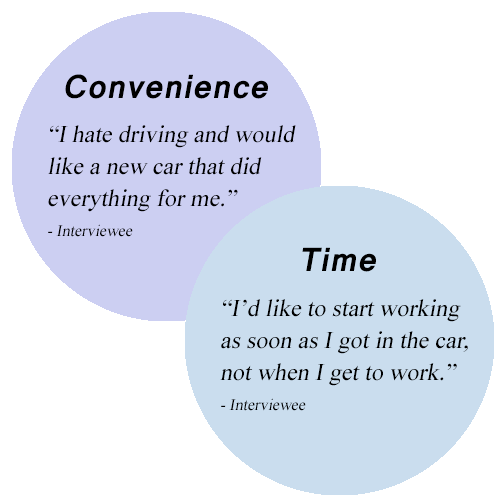
<style>
.page{position:relative;width:500px;height:500px;background:#ffffff}
.page>*{position:absolute;margin:0}
.t1{font:36px "Latha-Bold";letter-spacing:0.02em;color:#000000;font-style:italic}
.t2{font:24px/16px "TimesNewRomanPSMT";letter-spacing:0.001em;color:#000000;font-style:italic}
.t3{font:16px/10px "TimesNewRomanPSMT";letter-spacing:0.001em;color:#000000;font-style:italic}
</style>
<div class="page">
<p class="t1" style="left:65px;top:74px;width:203px;height:25px">Convenience</p>
<p class="t2" style="left:48px;top:125px;width:248px;height:112px">“I hate driving and would <br><br>like a new car that did <br><br>everything for me.”<br><br><br><span class="t3">- Interviewee</span></p>
<p class="t1" style="left:302px;top:247px;width:74px;height:25px">Time</p>
<p class="t2" style="left:220px;top:299px;width:248px;height:112px">“I’d like to start working <br><br>as soon as I got in the car, <br><br>not when I get to work.”<br><br><span class="t3"><br>- Interviewee</span></p>
</div>
